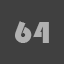
<style>
.page{position:relative;width:64px;height:64px;background:#404040}
.page>*{position:absolute;margin:0}
.t1{font:32px "Bauhaus93";color:#b1b1b1}
</style>
<div class="page">
<p class="t1" style="left:15px;top:21px;width:34px;height:22px">64</p>
</div>
